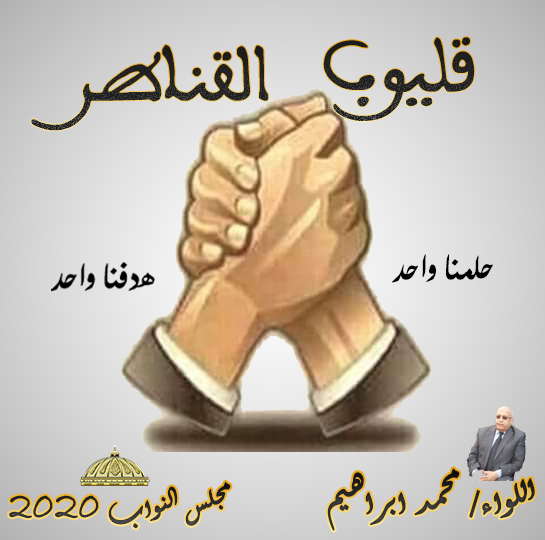
<style>
.page{position:relative;width:545px;height:540px}
.page>*{position:absolute;margin:0}
.t1{font:80px "ÎØ ãÓÚÏ ÇáãÛÑÈí";color:#1e1e1e}
.t2{font:45px "UrduTypesetting";color:#000000}
.t3{font:50px "Aldhabi";color:#2c2c2c;font-weight:bold}
.t4{font:40px "Aldhabi";color:#2b2b2b;font-weight:bold}
.t5{font:40px "BradleyHandITC";color:#2b2b2b;font-weight:bold}
</style>
<div class="page">
<p class="t1" style="left:323px;top:37px;width:152px;height:84px">قليوب</p>
<p class="t1" style="left:31px;top:45px;width:238px;height:86px">القناطر</p>
<p class="t2" style="left:392px;top:254px;width:101px;height:29px">حلمنا واحد</p>
<p class="t3" style="left:327px;top:468px;width:208px;height:63px">اللواء/ محمد ابراهيم</p>
<p class="t4" style="left:9px;top:482px;width:222px;height:47px">مجلس النواب <span class="t5">2020</span></p>
</div>
